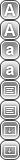
<style>
.page{position:relative;width:20px;height:160px}
.page>*{position:absolute;margin:0}
.t1{font:16px "Arial-BoldMT";letter-spacing:-0.1em;color:#ffffff}
</style>
<div class="page">
<p class="t1" style="left:4px;top:4px;width:12px;height:12px">A</p>
<p class="t1" style="left:4px;top:24px;width:12px;height:12px">A</p>
<p class="t1" style="left:6px;top:46px;width:8px;height:9px">a</p>
<p class="t1" style="left:6px;top:66px;width:8px;height:9px">a</p>
</div>
